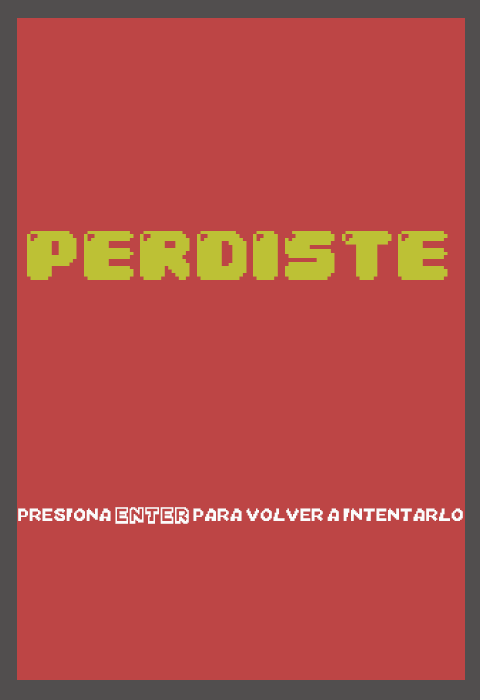
<style>
.page{position:relative;width:480px;height:700px;background:#bd4545}
.page>*{position:absolute;margin:0}
.t1{font:60px "04b30";color:#bdc235}
.t2{font:22px "Mario-Kart-DS";color:#fbfbfb}
</style>
<div class="page">
<p class="t1" style="left:27px;top:231px;width:421px;height:49px">PERDISTE</p>
<p class="t2" style="left:18px;top:507px;width:445px;height:17px">presiona ENTER para volver a intentarlo</p>
</div>
